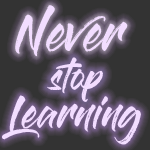
<style>
.page{position:relative;width:150px;height:150px;background:#333333}
.page>*{position:absolute;margin:0}
.t1{font:39px "GlossAndBloom";color:#f2ddff}
.t2{font:27.9px "GlossAndBloom";color:#f2ddff}
.t3{font:31.7px "GlossAndBloom";color:#f2ddff}
</style>
<div class="page">
<p class="t1" style="left:15px;top:5px;width:113px;height:52px">Never</p>
<p class="t2" style="left:47px;top:57px;width:56px;height:45px">stop</p>
<p class="t3" style="left:2px;top:95px;width:139px;height:50px">Learning</p>
</div>
